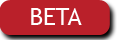
<style>
.page{position:relative;width:117px;height:40px;background:#ba202a}
.page>*{position:absolute;margin:0}
.t1{font:24px "TrebuchetMS";color:#ffffff}
</style>
<div class="page">
<p class="t1" style="left:31px;top:8px;width:51px;height:17px">BETA</p>
</div>
